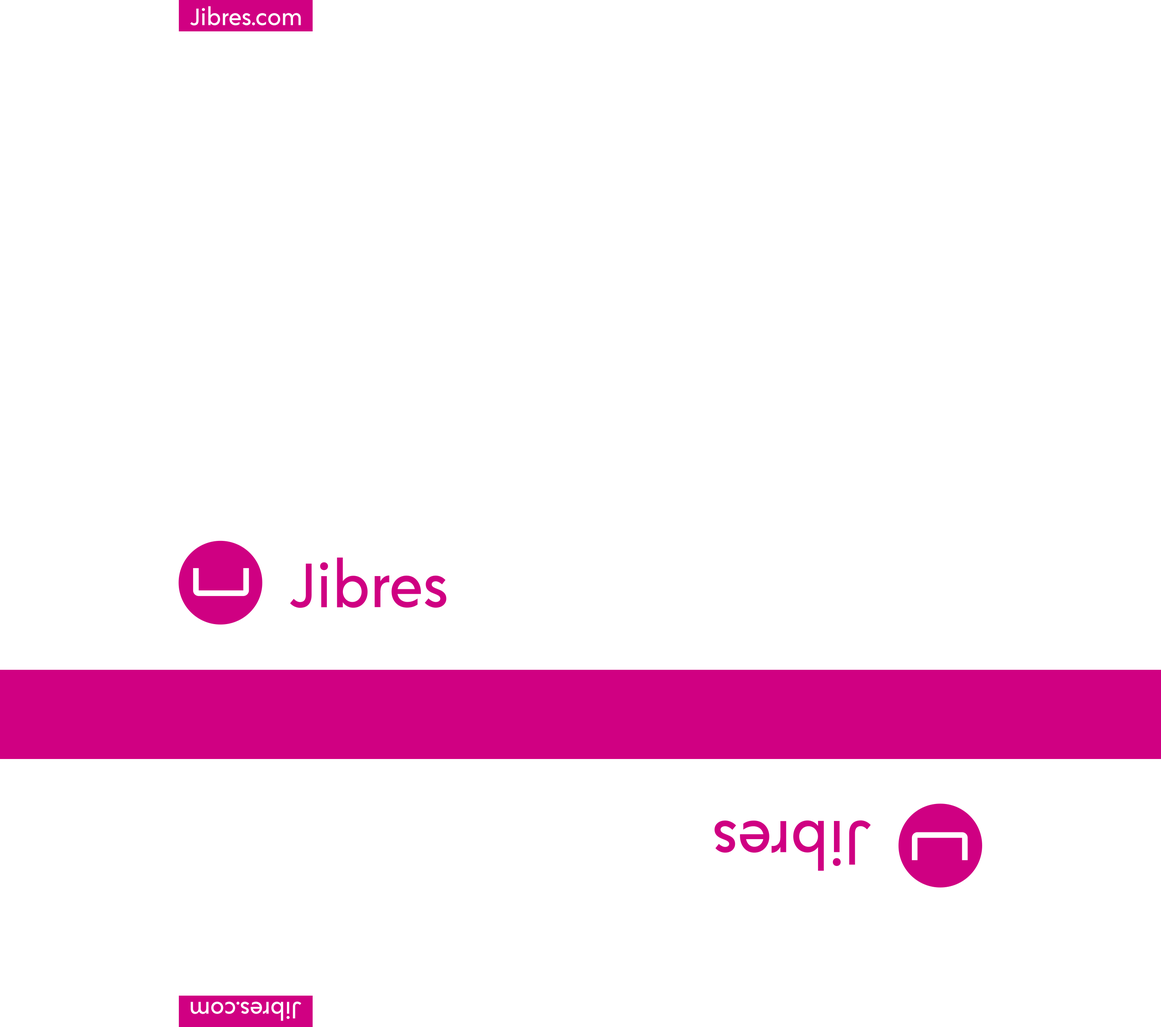
<style>
.page{position:relative;width:1161px;height:1027px;background:#ffffff}
.page>*{position:absolute;margin:0}
.t1{font:23.6px "Acre-Medium";color:#ffffff}
</style>
<div class="page">
<p class="t1" style="left:190px;top:6px;width:111px;height:20px">Jibres.com</p>
<p class="t1" style="left:191px;top:1001px;width:110px;height:20px;rotate:180deg">Jibres.com</p>
</div>
